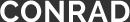
<style>
.page{position:relative;width:130px;height:22px;background:#333333}
.page>*{position:absolute;margin:0}
.t1{font:30.6px "Raleway-Bold";letter-spacing:0.03em;color:#ffffff}
</style>
<div class="page">
<p class="t1" style="left:0px;top:0px;width:130px;height:23px">CONRAD</p>
</div>
